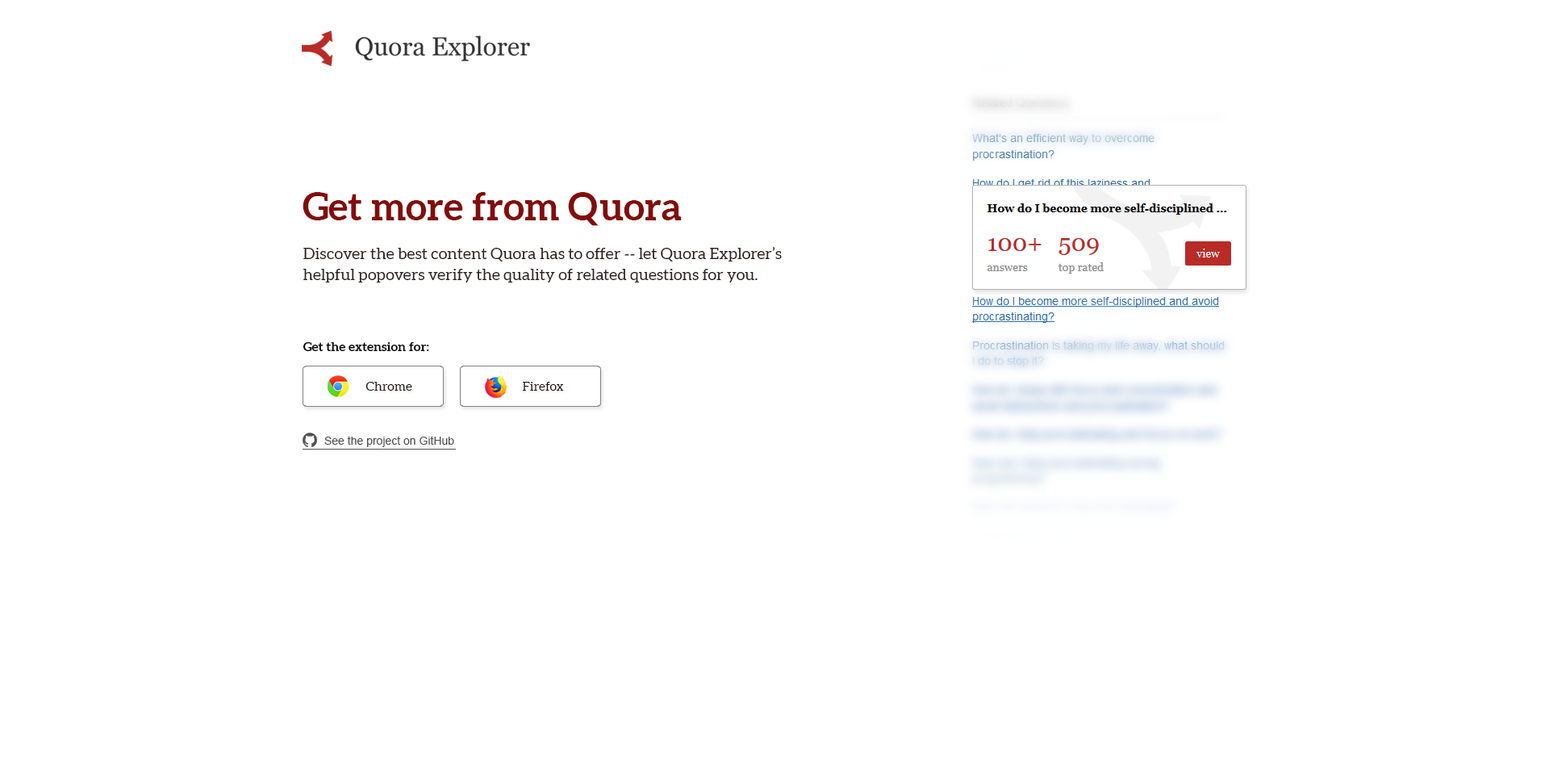
<style>
.page{position:relative;width:1549px;height:770px;background:#ffffff}
.page>*{position:absolute;margin:0}
.t1{font:38.7px "Aleo-Bold";color:#820d09}
.t2{font:16.1px/21px "Aleo-Regular";color:#1d0b0b}
.t3{font:12.9px "Aleo-Bold";color:#1d0b0b}
.t4{font:12.9px "Aleo-Regular";color:#1d0b0b}
.t5{font:11.3px "ArialMT";color:#505050}
</style>
<div class="page">
<p class="t1" style="left:303px;top:192px;width:379px;height:34px">Get more from Quora</p>
<p class="t2" style="left:303px;top:247px;width:479px;height:35px">Discover the best content Quora has to offer -- let Quora Explorer’s<br>helpful popovers verify the quality of related questions for you.</p>
<p class="t3" style="left:303px;top:342px;width:126px;height:9px">Get the extension for:</p>
<p class="t4" style="left:366px;top:382px;width:46px;height:9px">Chrome</p>
<p class="t4" style="left:522px;top:382px;width:42px;height:9px">Firefox</p>
<p class="t5" style="left:324px;top:436px;width:130px;height:11px">See the project on GitHub</p>
</div>
